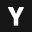
<style>
.page{position:relative;width:32px;height:32px;background:#171717}
.page>*{position:absolute;margin:0}
.t1{font:24px "Helvetica-Bold";letter-spacing:0.05em;color:#ffffff;font-weight:bold}
</style>
<div class="page">
<p class="t1" style="left:8px;top:7px;width:16px;height:19px">Y</p>
</div>
